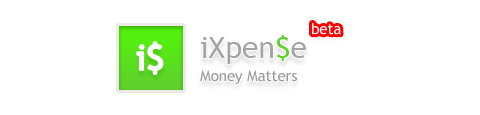
<style>
.page{position:relative;width:480px;height:115px;background:#ffffff}
.page>*{position:absolute;margin:0}
.t1{font:15px "TrebuchetMS";color:#ffffff}
.t2{font:30px "TrebuchetMS";color:#a5a4a4}
.t3{font:30px "TrebuchetMS";color:#b3b2b2}
.t4{font:30px "TrebuchetMS";color:#5fd12c}
.t5{font:35px "TrebuchetMS";color:#ffffff}
.t6{font:15px "TrebuchetMS";color:#9c9b9b}
</style>
<div class="page">
<p class="t1" style="left:312px;top:23px;width:29px;height:12px">beta</p>
<p class="t2" style="left:201px;top:35px;width:105px;height:29px"><span class="t3"> </span>iXpen<span class="t4">$</span>e</p>
<p class="t5" style="left:137px;top:42px;width:26px;height:32px">i$</p>
<p class="t6" style="left:200px;top:70px;width:97px;height:14px">Money Matters</p>
</div>
